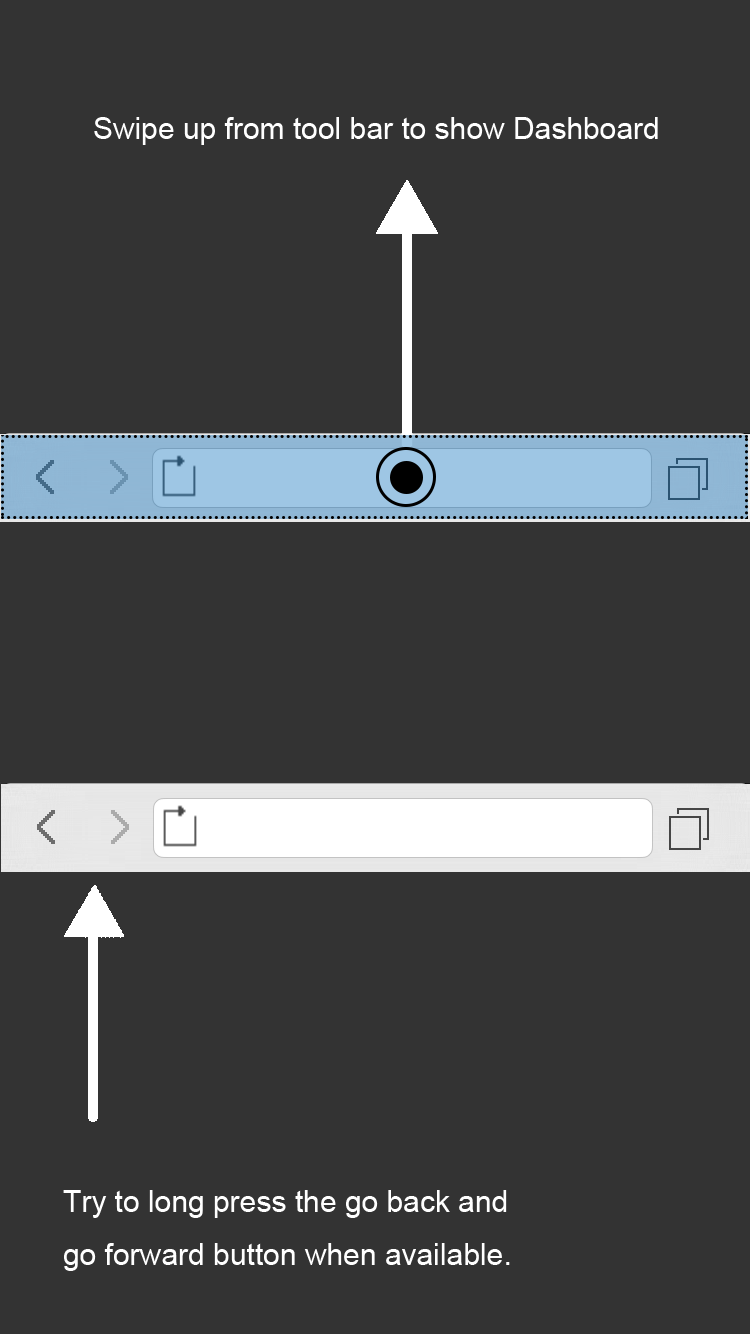
<style>
.page{position:relative;width:750px;height:1334px;background:#333333}
.page>*{position:absolute;margin:0}
.t1{font:30px "ArialMT";color:#ffffff}
</style>
<div class="page">
<p class="t1" style="left:94px;top:117px;width:564px;height:28px">Swipe up from tool bar to show Dashboard</p>
<p class="t1" style="left:63px;top:1190px;width:447px;height:81px">Try to long press the go back and <br>go forward button when available.</p>
</div>
